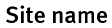
<style>
.page{position:relative;width:112px;height:28px;background:#ffffff}
.page>*{position:absolute;margin:0}
.t1{font:24px "MetaMedium-Roman";color:#000000}
</style>
<div class="page">
<p class="t1" style="left:6px;top:5px;width:101px;height:19px">Site name</p>
</div>
